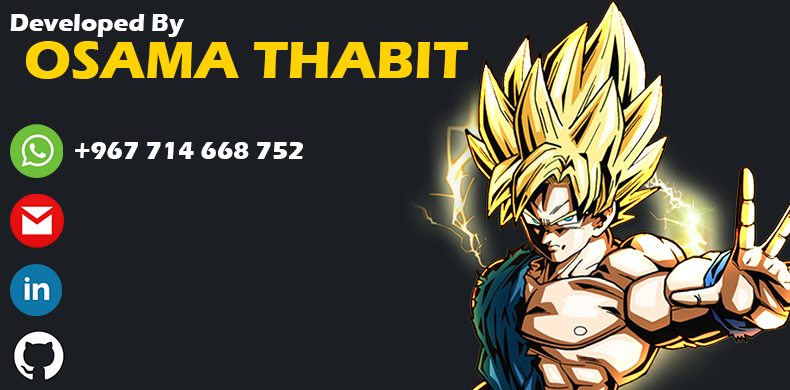
<style>
.page{position:relative;width:790px;height:390px;background:#1b1f23}
.page>*{position:absolute;margin:0}
.t1{font:25px "ErasITC-Bold";color:#ffffff}
.t2{font:54.2px "ErasITC-Bold";color:#ffd200}
</style>
<div class="page">
<p class="t1" style="left:10px;top:14px;width:174px;height:23px">Developed By</p>
<p class="t2" style="left:26px;top:41px;width:442px;height:38px">OSAMA THABIT</p>
<p class="t1" style="left:75px;top:142px;width:228px;height:17px">+967 714 668 752</p>
</div>
